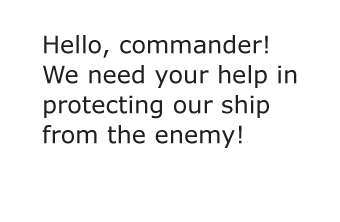
<style>
.page{position:relative;width:340px;height:222px;background:#ffffff}
.page>*{position:absolute;margin:0}
.t1{font:24px/30px "Verdana";color:#202020}
</style>
<div class="page">
<p class="t1" style="left:42px;top:35px;width:255px;height:113px">Hello, commander! We need your help in protecting our ship from the enemy!</p>
</div>
